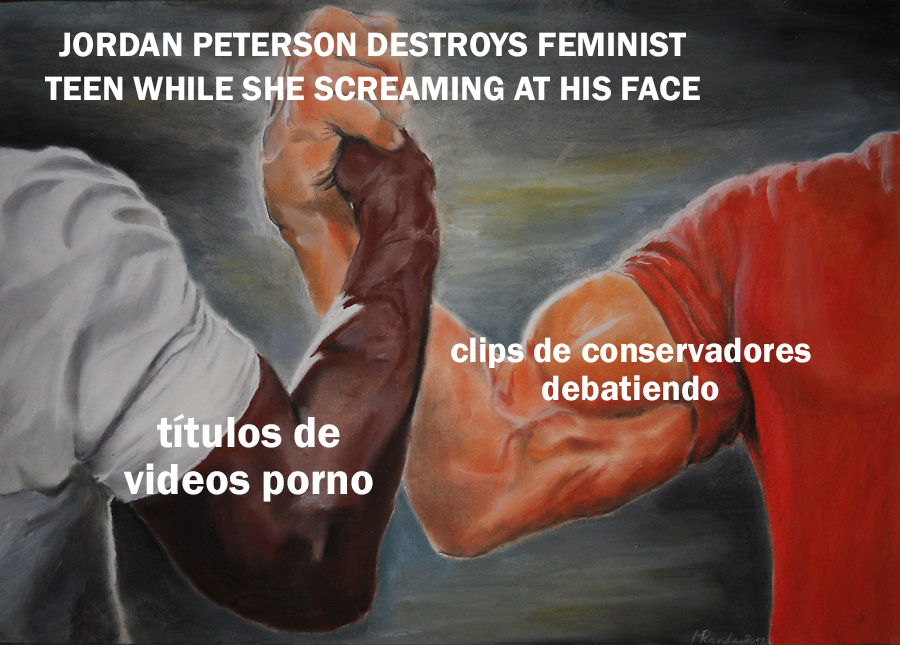
<style>
.page{position:relative;width:900px;height:645px}
.page>*{position:absolute;margin:0}
.t1{font:34.9px "FranklinGothic-Demi";color:#ffffff}
.t2{font:36.1px "FranklinGothic-Demi";color:#ffffff}
.t3{font:45px "FranklinGothic-Demi";color:#ffffff}
</style>
<div class="page">
<p class="t1" style="left:45px;top:32px;width:655px;height:69px;text-align:center">JORDAN PETERSON DESTROYS FEMINIST<br>TEEN WHILE SHE SCREAMING AT HIS FACE</p>
<p class="t2" style="left:451px;top:337px;width:360px;height:64px;text-align:center">clips de conservadores<br>debatiendo</p>
<p class="t3" style="left:123px;top:413px;width:250px;height:89px;text-align:center">títulos de<br>videos porno</p>
</div>
